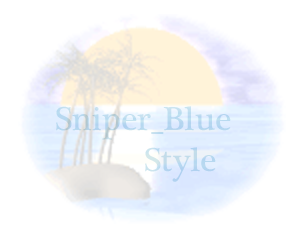
<style>
.page{position:relative;width:300px;height:240px;background:#ffffff}
.page>*{position:absolute;margin:0}
.t1{font:34px "PlantagenetCherokee";color:#b8d9f0}
</style>
<div class="page">
<p class="t1" style="left:56px;top:106px;width:175px;height:76px">Sniper_Blue<br>          Style</p>
</div>
